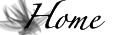
<style>
.page{position:relative;width:130px;height:35px;background:#ffffff}
.page>*{position:absolute;margin:0}
.t1{font:22.2px "Zapfino";color:#000000;scale:1.03 1}
.t2{font:22px "Zapfino";color:#000000}
</style>
<div class="page">
<p class="t1" style="left:24px;top:0px;width:81px;height:30px">Home</p>
<p class="t2" style="left:24px;top:0px;width:81px;height:30px">Home</p>
</div>
